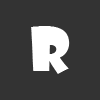
<style>
.page{position:relative;width:100px;height:100px;background:#333333}
.page>*{position:absolute;margin:0}
.t1{font:58.3px "ShowcardGothic-Reg";color:#ffffff}
</style>
<div class="page">
<p class="t1" style="left:31px;top:26px;width:39px;height:48px">r</p>
</div>
